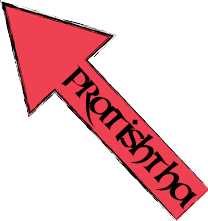
<style>
.page{position:relative;width:208px;height:221px;background:#ffffff}
.page>*{position:absolute;margin:0}
.t1{font:33px "Mael";color:#000000}
</style>
<div class="page">
<p class="t1" style="left:61px;top:64px;width:137px;height:146px;rotate:47deg">Pratishtha</p>
</div>
